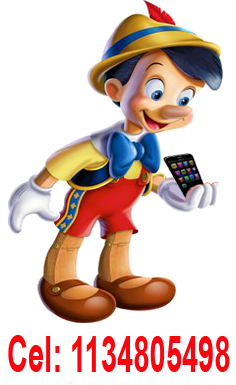
<style>
.page{position:relative;width:236px;height:385px;background:#ffffff}
.page>*{position:absolute;margin:0}
.t1{font:50.2px "Arial-BoldMT";color:#fa040f;scale:0.58 1}
</style>
<div class="page">
<p class="t1" style="left:8px;top:335px;width:222px;height:37px">Cel: 1134805498</p>
</div>
